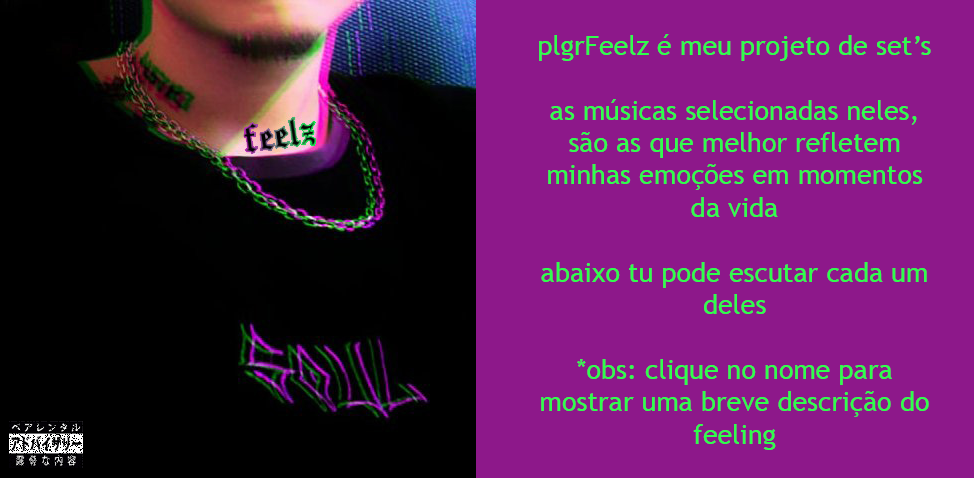
<style>
.page{position:relative;width:974px;height:478px;background:#8d188a}
.page>*{position:absolute;margin:0}
.t1{font:27px "TrebuchetMS";color:#2eff4c}
</style>
<div class="page">
<p class="t1" style="left:539px;top:34px;width:392px;height:416px;text-align:center">plgrFeelz é meu projeto de set’s<br><br>as músicas selecionadas neles, são as que melhor refletem minhas emoções em momentos da vida<br><br>abaixo tu pode escutar cada um deles<br><br>*obs: clique no nome para mostrar uma breve descrição do feeling</p>
</div>
